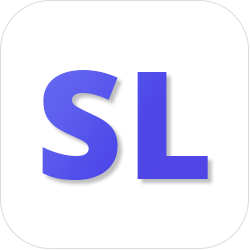
<style>
.page{position:relative;width:250px;height:250px;background:#ffffff}
.page>*{position:absolute;margin:0}
.t1{font:150px "OpenSans-Extrabold";letter-spacing:0.02em;color:#504dea}
</style>
<div class="page">
<p class="t1" style="left:42px;top:70px;width:166px;height:110px">SL</p>
</div>
